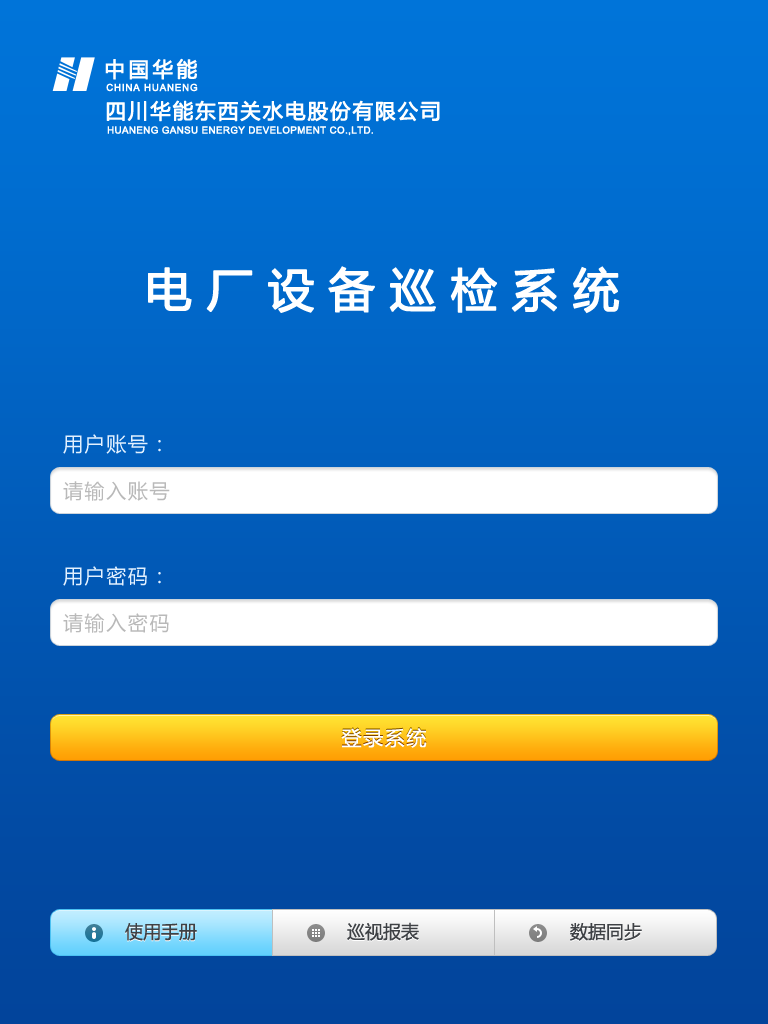
<style>
.page{position:relative;width:768px;height:1024px}
.page>*{position:absolute;margin:0}
.t1{font:20.3px "MicrosoftYaHei";letter-spacing:0.16em;color:#ffffff;font-weight:bold}
.t2{font:9.7px "ArialMT";letter-spacing:0.06em;color:#ffffff;font-weight:bold}
.t3{font:20.3px "MicrosoftYaHei";letter-spacing:0.08em;color:#ffffff;font-weight:bold}
.t4{font:9.7px "ArialMT";letter-spacing:0.02em;color:#ffffff;font-weight:bold}
.t5{font:46px "MicrosoftYaHei";letter-spacing:0.3em;color:#ffffff;font-weight:bold}
.t6{font:20px "MicrosoftYaHei";letter-spacing:0.08em;color:#e3f1ff}
.t7{font:20px "MicrosoftYaHei";letter-spacing:0.08em;color:#b9b9b9}
.t8{font:20px "MicrosoftYaHei";letter-spacing:0.08em;color:#ffffff}
.t9{font:18px "MicrosoftYaHei";color:#3e4145}
</style>
<div class="page">
<p class="t1" style="left:105px;top:58px;width:92px;height:22px">中国华能</p>
<p class="t2" style="left:106px;top:83px;width:92px;height:9px">CHINA HUANENG</p>
<p class="t3" style="left:106px;top:100px;width:334px;height:22px">四川华能东西关水电股份有限公司</p>
<p class="t4" style="left:107px;top:126px;width:266px;height:10px">HUANENG GANSU ENERGY DEVELOPMENT CO.,LTD.</p>
<p class="t5" style="left:148px;top:266px;width:472px;height:48px">电厂设备巡检系统</p>
<p class="t6" style="left:63px;top:434px;width:98px;height:20px">用户账号：</p>
<p class="t7" style="left:63px;top:481px;width:107px;height:20px">请输入账号</p>
<p class="t6" style="left:63px;top:566px;width:98px;height:20px">用户密码：</p>
<p class="t7" style="left:63px;top:613px;width:106px;height:20px">请输入密码</p>
<p class="t8" style="left:341px;top:728px;width:86px;height:20px">登录系统</p>
<p class="t9" style="left:125px;top:923px;width:72px;height:18px">使用手册</p>
<p class="t9" style="left:347px;top:922px;width:72px;height:19px">巡视报表</p>
<p class="t9" style="left:570px;top:923px;width:72px;height:18px">数据同步</p>
</div>
